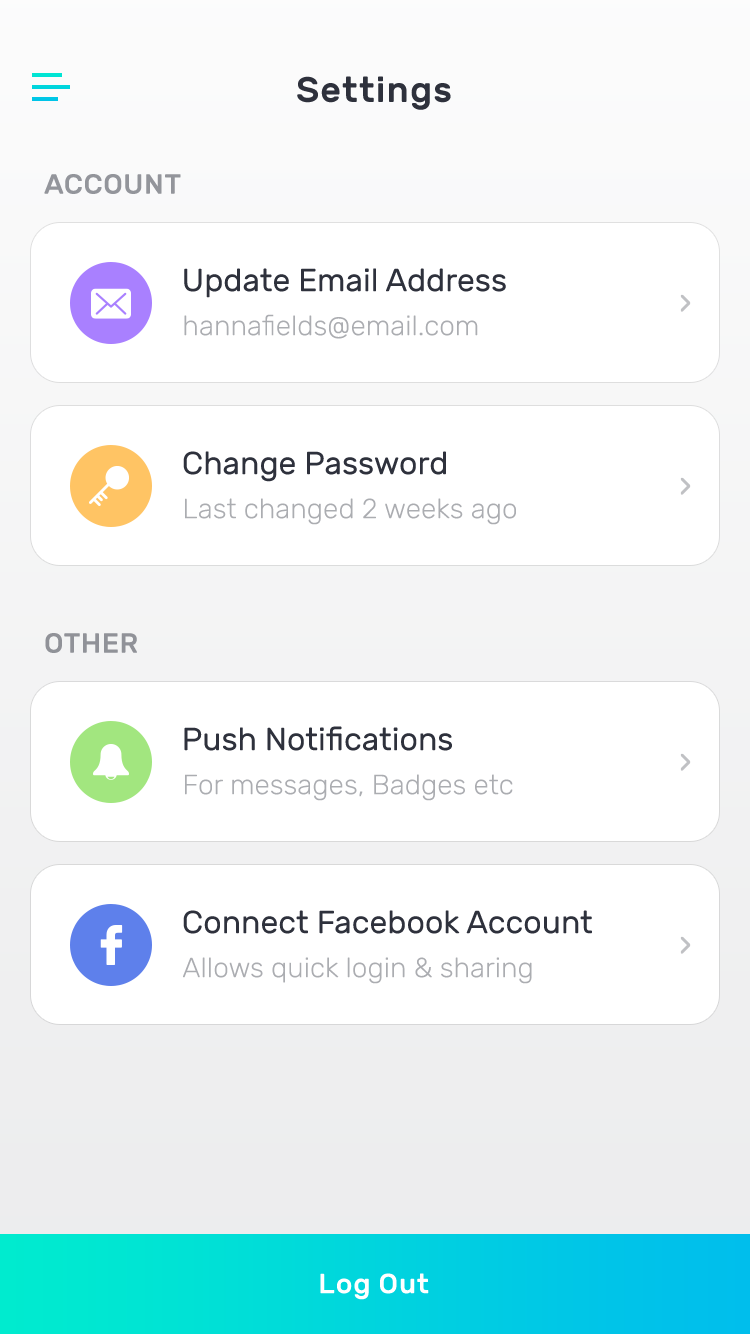
<style>
.page{position:relative;width:750px;height:1334px;background:#ffffff}
.page>*{position:absolute;margin:0}
.t1{font:36px "Rubik-Medium";letter-spacing:0.03em;color:#2e313c}
.t2{font:28px "Rubik-Medium";letter-spacing:0.02em;color:#93959b;text-transform:uppercase}
.t3{font:32px "Rubik-Regular";color:#2e313c}
.t4{font:28px "Rubik-Light";color:#abadb1}
.t5{font:28px "Rubik-Medium";letter-spacing:0.02em;color:#909298;text-transform:uppercase}
.t6{font:28px "Rubik-Medium";letter-spacing:0.03em;color:#ffffff}
</style>
<div class="page">
<p class="t1" style="left:297px;top:76px;width:154px;height:34px">Settings</p>
<p class="t2" style="left:44px;top:174px;width:137px;height:20px">Account</p>
<p class="t3" style="left:184px;top:268px;width:322px;height:30px">Update Email Address</p>
<p class="t4" style="left:184px;top:314px;width:294px;height:25px">hannafields@email.com</p>
<p class="t3" style="left:183px;top:451px;width:263px;height:31px">Change Password</p>
<p class="t4" style="left:185px;top:498px;width:331px;height:27px">Last changed 2 weeks ago</p>
<p class="t5" style="left:45px;top:633px;width:92px;height:20px">OTHER</p>
<p class="t3" style="left:184px;top:726px;width:268px;height:25px">Push Notifications</p>
<p class="t4" style="left:185px;top:774px;width:328px;height:27px">For messages, Badges etc</p>
<p class="t3" style="left:183px;top:910px;width:409px;height:24px">Connect Facebook Account</p>
<p class="t4" style="left:183px;top:957px;width:349px;height:27px">Allows quick login &amp; sharing</p>
<p class="t6" style="left:320px;top:1273px;width:109px;height:27px">Log Out</p>
</div>
